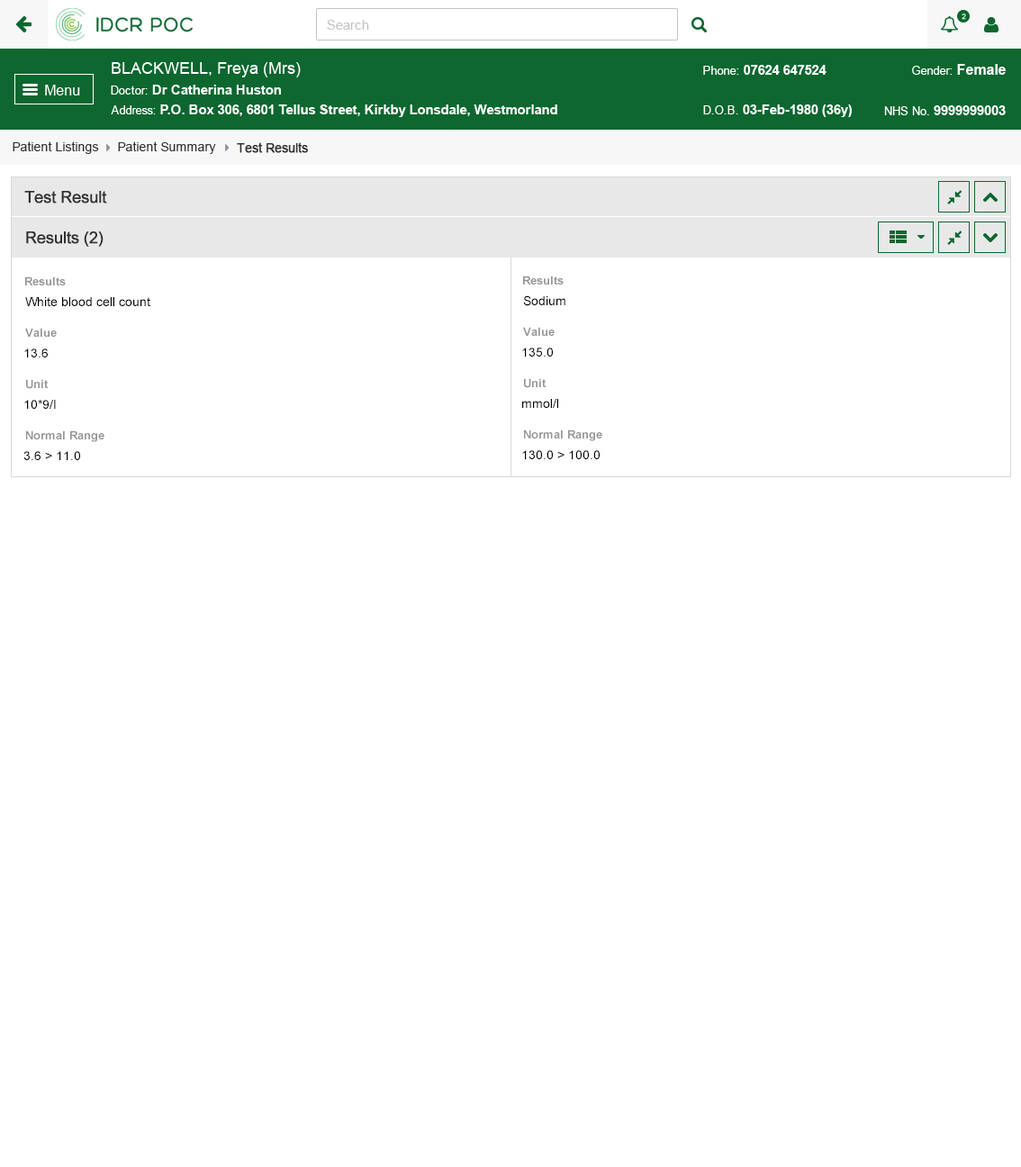
<style>
.page{position:relative;width:1021px;height:1167px;background:#ffffff}
.page>*{position:absolute;margin:0}
.t1{font:12.6px "ArialMT";color:#313131}
.t2{font:12.6px "ArialMT";color:#313131;font-weight:bold}
.t3{font:16.2px "ArialMT";color:#303030;font-weight:bold}
.t4{font:11.7px "Arial-BoldMT";color:#959595}
.t5{font:12.6px "ArialMT";color:#000000}
</style>
<div class="page">
<p class="t1" style="left:13px;top:141px;width:86px;height:13px">Patient Listings</p>
<p class="t1" style="left:118px;top:141px;width:98px;height:13px">Patient Summary</p>
<p class="t2" style="left:237px;top:142px;width:71px;height:11px">Test Results</p>
<p class="t3" style="left:24px;top:191px;width:83px;height:13px">Test Result</p>
<p class="t3" style="left:26px;top:231px;width:78px;height:16px">Results (2)</p>
<p class="t4" style="left:25px;top:277px;width:41px;height:9px">Results</p>
<p class="t4" style="left:523px;top:276px;width:41px;height:9px">Results</p>
<p class="t5" style="left:25px;top:297px;width:125px;height:9px">White blood cell count</p>
<p class="t5" style="left:523px;top:295px;width:43px;height:11px">Sodium</p>
<p class="t4" style="left:25px;top:328px;width:32px;height:9px">Value</p>
<p class="t4" style="left:523px;top:327px;width:32px;height:9px">Value</p>
<p class="t5" style="left:24px;top:349px;width:24px;height:9px">13.6</p>
<p class="t5" style="left:522px;top:348px;width:31px;height:9px">135.0</p>
<p class="t4" style="left:26px;top:379px;width:23px;height:10px">Unit</p>
<p class="t4" style="left:524px;top:378px;width:23px;height:10px">Unit</p>
<p class="t5" style="left:24px;top:400px;width:32px;height:9px">10*9/I</p>
<p class="t5" style="left:522px;top:399px;width:36px;height:9px">mmol/l</p>
<p class="t4" style="left:26px;top:431px;width:78px;height:11px">Normal Range</p>
<p class="t4" style="left:524px;top:430px;width:79px;height:11px">Normal Range</p>
<p class="t5" style="left:23px;top:451px;width:57px;height:9px">3.6 &gt; 11.0</p>
<p class="t5" style="left:522px;top:450px;width:78px;height:9px">130.0 &gt; 100.0</p>
</div>
